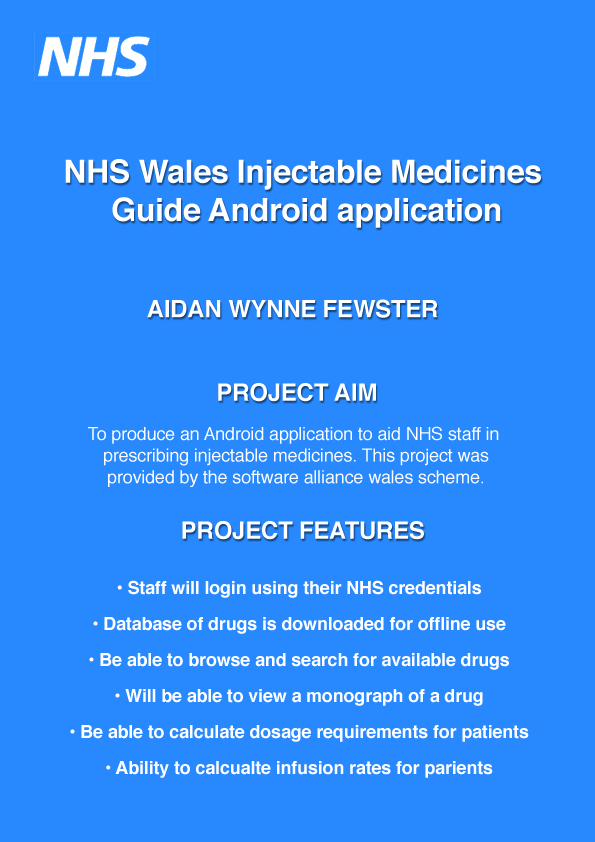
<style>
.page{position:relative;width:595px;height:842px;background:#2889ff}
.page>*{position:absolute;margin:0}
.t1{font:32px "Helvetica-Bold";letter-spacing:-0.01em;color:#ffffff}
.t2{font:24px "Helvetica-Bold";letter-spacing:-0.01em;color:#ffffff}
.t3{font:18px "Helvetica";letter-spacing:-0.01em;color:#ffffff}
.t4{font:18px/36px "Helvetica-Bold";letter-spacing:-0.01em;color:#ffffff}
</style>
<div class="page">
<p class="t1" style="left:65px;top:159px;width:476px;height:69px;text-align:center">NHS Wales Injectable Medicines <br>Guide Android application</p>
<p class="t2" style="left:147px;top:299px;width:291px;height:19px">AIDAN WYNNE FEWSTER</p>
<p class="t2" style="left:218px;top:383px;width:158px;height:19px">PROJECT AIM</p>
<p class="t3" style="left:88px;top:426px;width:411px;height:61px;text-align:center">To produce an Android application to aid NHS staff in <br>prescribing injectable medicines. This project was<br>provided by the software alliance wales scheme.</p>
<p class="t2" style="left:182px;top:521px;width:242px;height:19px">PROJECT FEATURES</p>
<p class="t4" style="left:70px;top:580px;width:459px;height:198px;text-align:center">• Staff will login using their NHS credentials<br>• Database of drugs is downloaded for offline use<br>• Be able to browse and search for available drugs<br>• Will be able to view a monograph of a drug<br>• Be able to calculate dosage requirements for patients<br>• Ability to calcualte infusion rates for parients</p>
</div>
